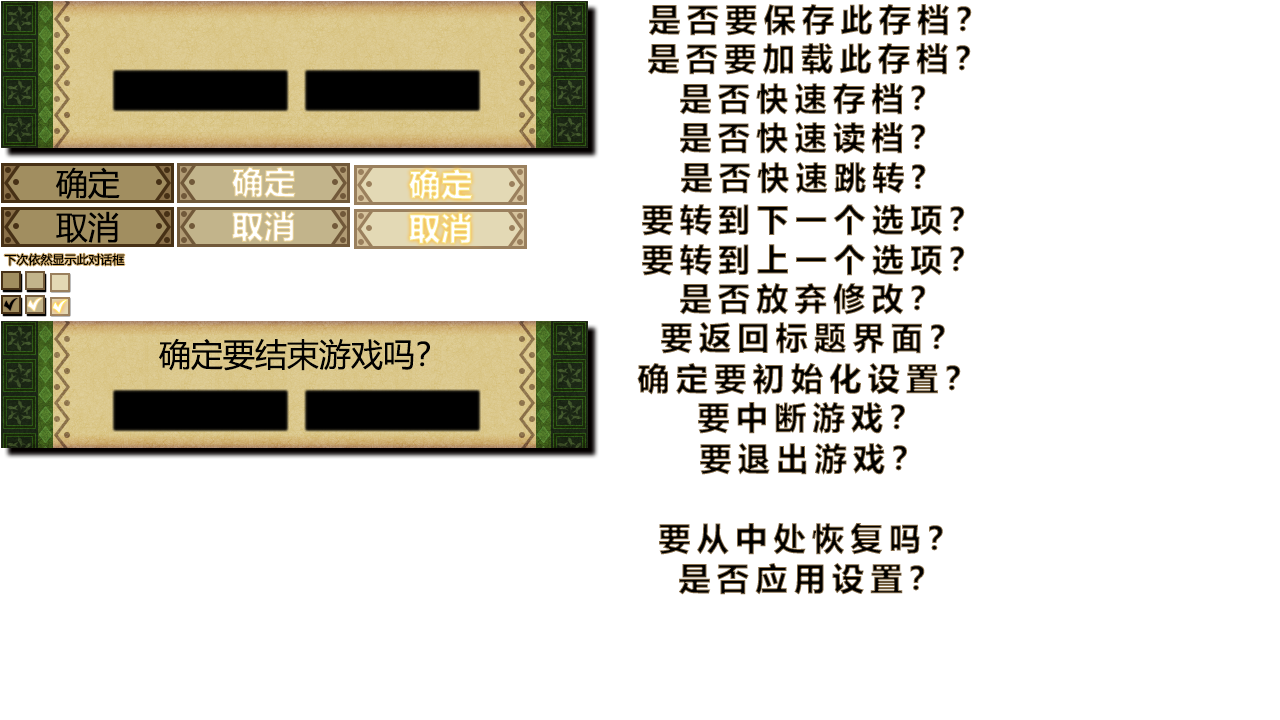
<style>
.page{position:relative;width:1280px;height:720px;background:#ffffff}
.page>*{position:absolute;margin:0}
.t1{font:32px "MicrosoftYaHei-Bold";letter-spacing:0.2em}
.t2{font:32px "MicrosoftYaHei";color:#000000}
.t3{font:32px "MicrosoftYaHei-Bold"}
.t4{font:12px "MicrosoftYaHei";color:#000000}
</style>
<div class="page">
<p class="t1" style="left:649px;top:4px;width:323px;height:32px">是否要保存此存档？</p>
<p class="t1" style="left:648px;top:43px;width:323px;height:32px">是否要加载此存档？</p>
<p class="t1" style="left:680px;top:83px;width:246px;height:32px">是否快速存档？</p>
<p class="t1" style="left:680px;top:122px;width:246px;height:32px">是否快速读档？</p>
<p class="t2" style="left:55px;top:167px;width:65px;height:33px">确定</p>
<p class="t3" style="left:231px;top:166px;width:65px;height:32px">确定</p>
<p class="t3" style="left:408px;top:168px;width:65px;height:32px">确定</p>
<p class="t1" style="left:681px;top:162px;width:245px;height:32px">是否快速跳转?</p>
<p class="t1" style="left:642px;top:204px;width:323px;height:32px">要转到下一个选项？</p>
<p class="t2" style="left:56px;top:211px;width:63px;height:32px">取消</p>
<p class="t3" style="left:232px;top:210px;width:63px;height:32px">取消</p>
<p class="t3" style="left:409px;top:212px;width:63px;height:32px">取消</p>
<p class="t1" style="left:642px;top:244px;width:323px;height:32px">要转到上一个选项？</p>
<p class="t4" style="left:4px;top:253px;width:121px;height:13px">下次依然显示此对话框</p>
<p class="t1" style="left:680px;top:283px;width:246px;height:32px">是否放弃修改？</p>
<p class="t1" style="left:661px;top:322px;width:284px;height:32px">要返回标题界面？</p>
<p class="t2" style="left:159px;top:339px;width:271px;height:32px">确定要结束游戏吗？</p>
<p class="t1" style="left:637px;top:363px;width:324px;height:32px">确定要初始化设置？</p>
<p class="t1" style="left:698px;top:402px;width:207px;height:32px">要中断游戏？</p>
<p class="t1" style="left:700px;top:443px;width:207px;height:32px">要退出游戏？</p>
<p class="t1" style="left:659px;top:523px;width:284px;height:32px">要从中处恢复吗？</p>
<p class="t1" style="left:679px;top:563px;width:246px;height:32px">是否应用设置？</p>
</div>
